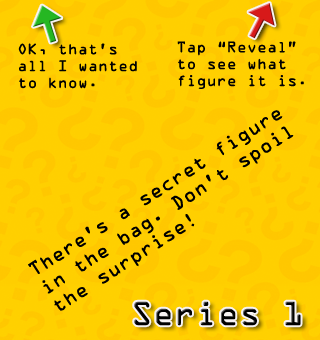
<style>
.page{position:relative;width:320px;height:340px;background:#ffcf00}
.page>*{position:absolute;margin:0}
.t1{font:14px "OCRAStd";color:#000000}
.t2{font:18px "OCRAStd";color:#000000}
.t3{font:30px "OCRAStd";color:#000000}
</style>
<div class="page">
<p class="t1" style="left:177px;top:41px;width:127px;height:48px">Tap “Reveal”<br>to see what<br>figure it is.</p>
<p class="t1" style="left:18px;top:43px;width:119px;height:46px">OK, that’s<br>all I wanted<br>to know.</p>
<p class="t2" style="left:28px;top:110px;width:266px;height:201px;rotate:-33deg">There’s a secret figure<br>in the bag. Don’t spoil<br>the surprise!</p>
<p class="t3" style="left:134px;top:301px;width:167px;height:25px">Series 1</p>
</div>
